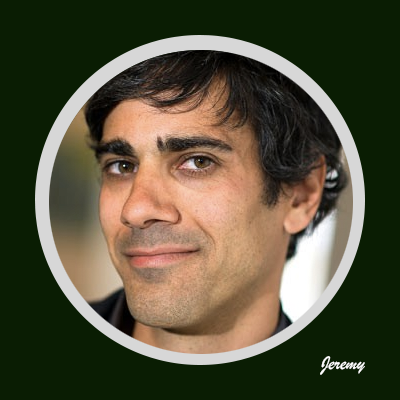
<style>
.page{position:relative;width:400px;height:400px;background:#0a1d03}
.page>*{position:absolute;margin:0}
.t1{font:20px "BrushScriptMT";color:#ffffff}
</style>
<div class="page">
<p class="t1" style="left:320px;top:356px;width:45px;height:19px">Jeremy</p>
</div>
